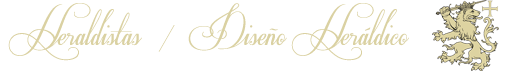
<style>
.page{position:relative;width:508px;height:71px;background:#ffffff}
.page>*{position:absolute;margin:0}
.t1{font:40px "Respective";color:#dad1a2}
</style>
<div class="page">
<p class="t1" style="left:8px;top:3px;width:134px;height:58px">Heraldistas</p>
<p class="t1" style="left:158px;top:3px;width:251px;height:58px">/  Diseño Heráldico</p>
</div>
